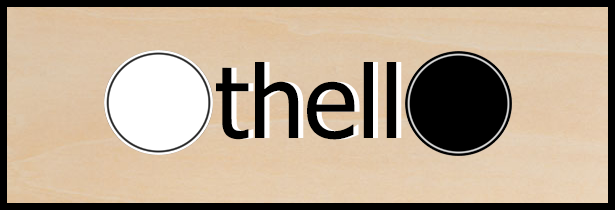
<style>
.page{position:relative;width:615px;height:210px}
.page>*{position:absolute;margin:0}
.t1{font:100px "Tahoma";color:#000000}
</style>
<div class="page">
<p class="t1" style="left:216px;top:62px;width:181px;height:78px">thell</p>
</div>
